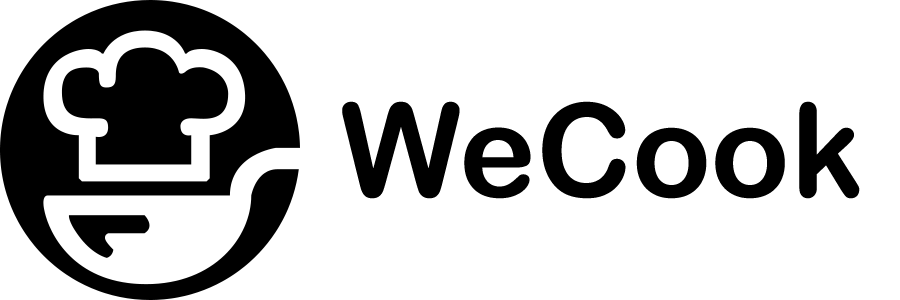
<style>
.page{position:relative;width:900px;height:300px;background:#ffffff}
.page>*{position:absolute;margin:0}
.t1{font:130px "ArialRoundedMTBold";color:#000000}
</style>
<div class="page">
<p class="t1" style="left:342px;top:101px;width:518px;height:98px">WeCook</p>
</div>
